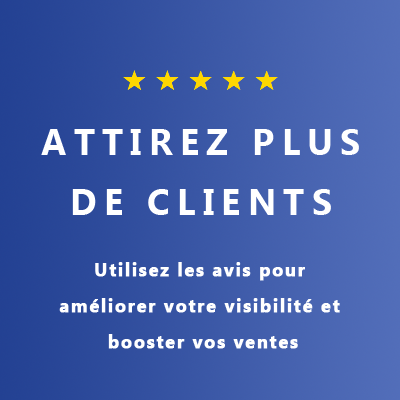
<style>
.page{position:relative;width:400px;height:400px}
.page>*{position:absolute;margin:0}
.t1{font:36px/60px "MicrosoftTaiLe-Bold";letter-spacing:0.2em;color:#ffffff;text-transform:uppercase}
.t2{font:18px/36px "MicrosoftTaiLe-Bold";letter-spacing:0.075em;color:#ffffff;font-weight:bold}
</style>
<div class="page">
<p class="t1" style="left:41px;top:129px;width:318px;height:86px;text-align:center">ATTIREZ PLUS<br>DE CLIENTS</p>
<p class="t2" style="left:59px;top:262px;width:281px;height:87px;text-align:center">Utilisez les avis pour <br>améliorer votre visibilité et <br>booster vos ventes</p>
</div>
